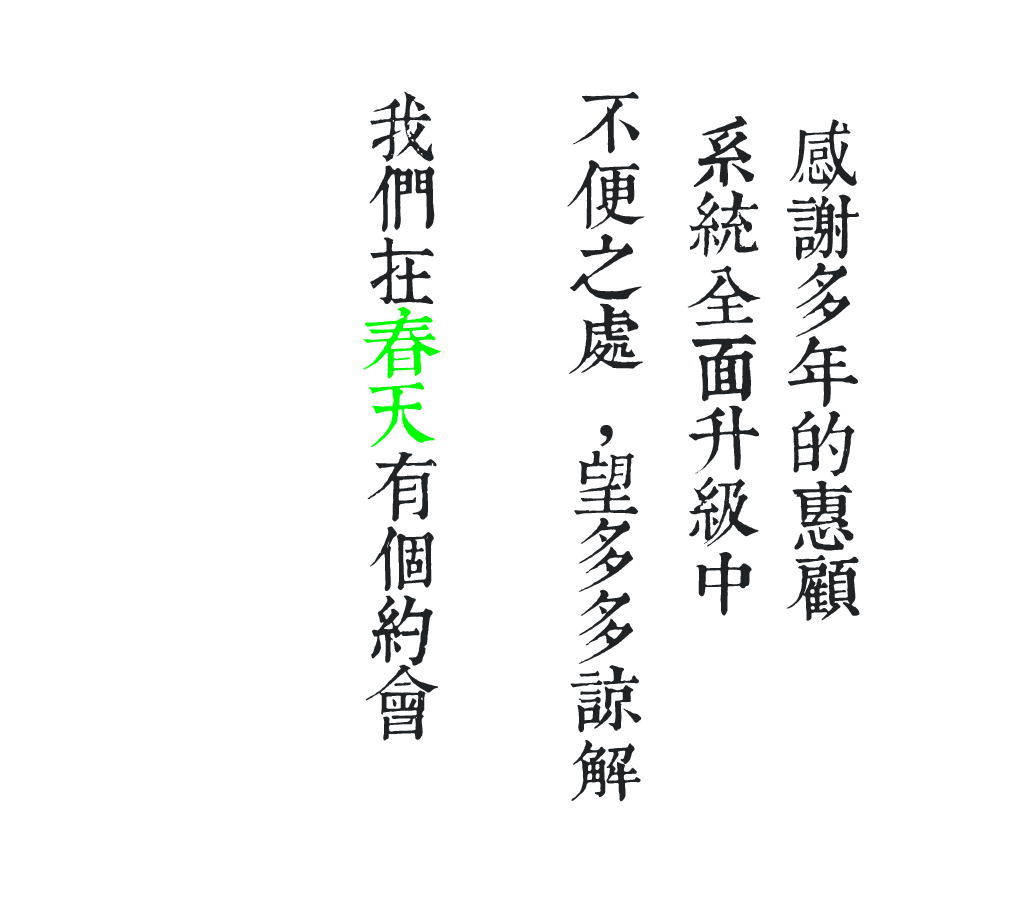
<style>
.page{position:relative;width:1024px;height:900px;background:#ffffff}
.page>*{position:absolute;margin:0}
.t1{font:72px/72px "TpldKhangXiDict";color:#202326}
.t2{font:72px/72px "TpldKhangXiDict";color:#00ff00}
</style>
<div class="page">
<p class="t1" style="left:363px;top:91px;width:78px;height:650px;text-align:center">我<br>們<br>在<br><span class="t2">春<br>天<br></span>有<br>個<br>約<br>會</p>
<p class="t1" style="left:567px;top:92px;width:78px;height:710px;text-align:center">不<br>便<br>之<br>處<br>  ，<br>望<br>多<br>多<br>諒<br>解</p>
<p class="t1" style="left:687px;top:116px;width:74px;height:500px;text-align:center">系<br>統<br>全<br>面<br>升<br>級<br>中</p>
<p class="t1" style="left:786px;top:119px;width:74px;height:502px;text-align:center">感<br>謝<br>多<br>年<br>的<br>惠<br>顧</p>
</div>
